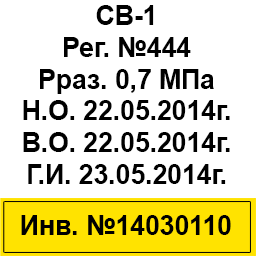
<style>
.page{position:relative;width:256px;height:256px;background:#ffffff}
.page>*{position:absolute;margin:0}
.t1{font:26.5px "Arial-BoldMT";color:#000000}
</style>
<div class="page">
<p class="t1" style="left:23px;top:5px;width:207px;height:179px;text-align:center">СВ-1<br>Рег. №444<br>Рраз. 0,7 МПа<br>Н.О. 22.05.2014г.<br>В.О. 22.05.2014г.<br>Г.И. 23.05.2014г.</p>
<p class="t1" style="left:21px;top:215px;width:210px;height:20px">Инв. №14030110</p>
</div>
